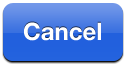
<style>
.page{position:relative;width:126px;height:65px}
.page>*{position:absolute;margin:0}
.t1{font:24px "HelveticaNeue-Bold";color:#ffffff}
</style>
<div class="page">
<p class="t1" style="left:24px;top:22px;width:77px;height:19px">Cancel</p>
</div>
